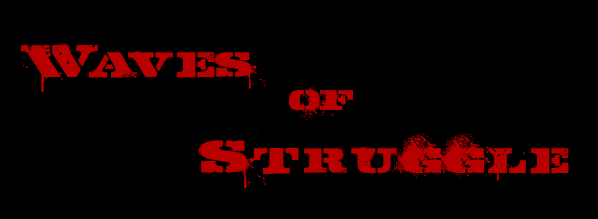
<style>
.page{position:relative;width:598px;height:219px;background:#000000}
.page>*{position:absolute;margin:0}
.t1{font:72px "GASMASK";letter-spacing:0.01em;color:#b80000}
.t2{font:80px "GASMASK";letter-spacing:-0.15em;color:#b80000}
.t3{font:72px "GASMASK";letter-spacing:-0.15em;color:#b80000}
.t4{font:72px "GASMASK";letter-spacing:0.005em;color:#b80000}
.t5{font:100px "GASMASK";letter-spacing:-0.05em;color:#b80000}
.t6{font:80px "GASMASK";letter-spacing:0.01em;color:#b80000}
</style>
<div class="page">
<p class="t1" style="left:21px;top:42px;width:548px;height:147px"><span class="t2">W</span><span class="t3">a</span><span class="t4">ves </span><span class="t5">of <br>     </span><span class="t6">S</span>truggle</p>
</div>
